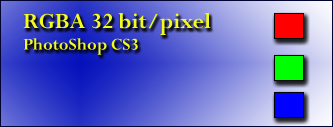
<style>
.page{position:relative;width:333px;height:127px}
.page>*{position:absolute;margin:0}
.t1{font:24px "Perpetua-Bold";color:#f2fa1f}
.t2{font:18px "Perpetua-Bold";color:#f2fa1f}
</style>
<div class="page">
<p class="t1" style="left:23px;top:13px;width:188px;height:42px">RGBA 32 bit/pixel<br><span class="t2">PhotoShop CS3</span></p>
</div>
